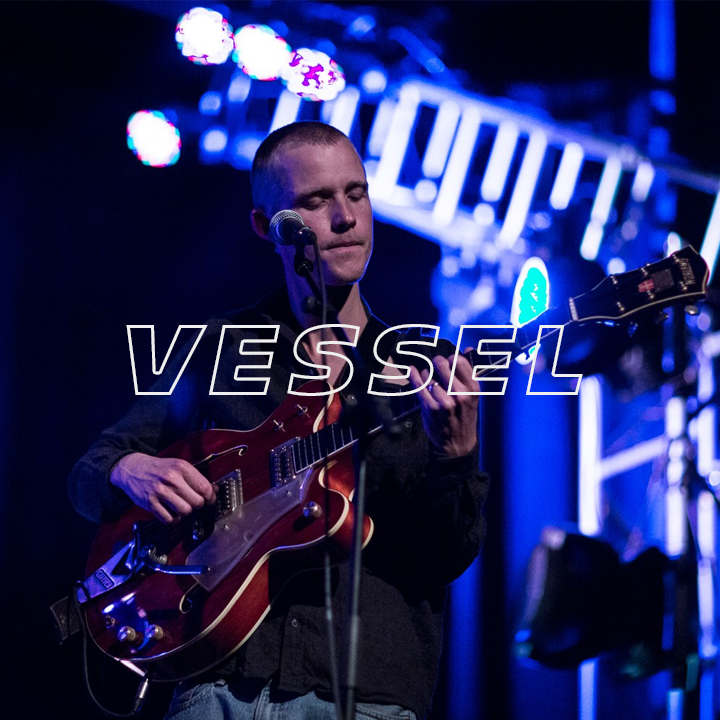
<style>
.page{position:relative;width:720px;height:720px}
.page>*{position:absolute;margin:0}
.t1{font:100px "Majoris-Italic";letter-spacing:0.1em;text-transform:uppercase}
</style>
<div class="page">
<p class="t1" style="left:126px;top:324px;width:457px;height:72px">vessel</p>
</div>
